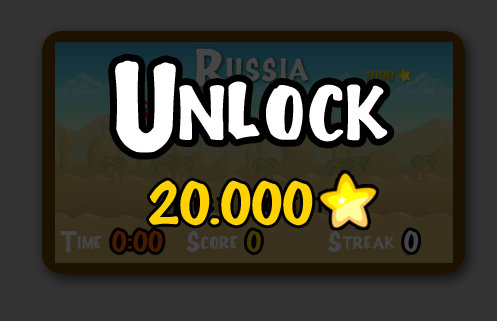
<style>
.page{position:relative;width:497px;height:321px;background:#333333}
.page>*{position:absolute;margin:0}
.t1{font:38.8px "Full-House20";color:#454545}
.t2{font:96.8px "Full-House20";color:#ffffff}
.t3{font:45.4px "Full-House20";color:#ffd200}
.t4{font:22px "Full-House20";color:#454545}
.t5{font:22px "Full-House20";color:#451a00}
.t6{font:22px "Full-House20";color:#453900}
</style>
<div class="page">
<p class="t1" style="left:195px;top:48px;width:114px;height:39px">Russia</p>
<p class="t2" style="left:115px;top:60px;width:273px;height:93px">Unlock</p>
<p class="t3" style="left:149px;top:180px;width:164px;height:46px">20.000</p>
<p class="t4" style="left:60px;top:230px;width:42px;height:22px">Time</p>
<p class="t5" style="left:112px;top:230px;width:51px;height:22px">0:00</p>
<p class="t4" style="left:186px;top:230px;width:52px;height:22px">Score</p>
<p class="t6" style="left:247px;top:230px;width:14px;height:22px">0</p>
<p class="t4" style="left:328px;top:230px;width:66px;height:22px">Streak</p>
<p class="t4" style="left:404px;top:230px;width:15px;height:22px">0</p>
</div>
